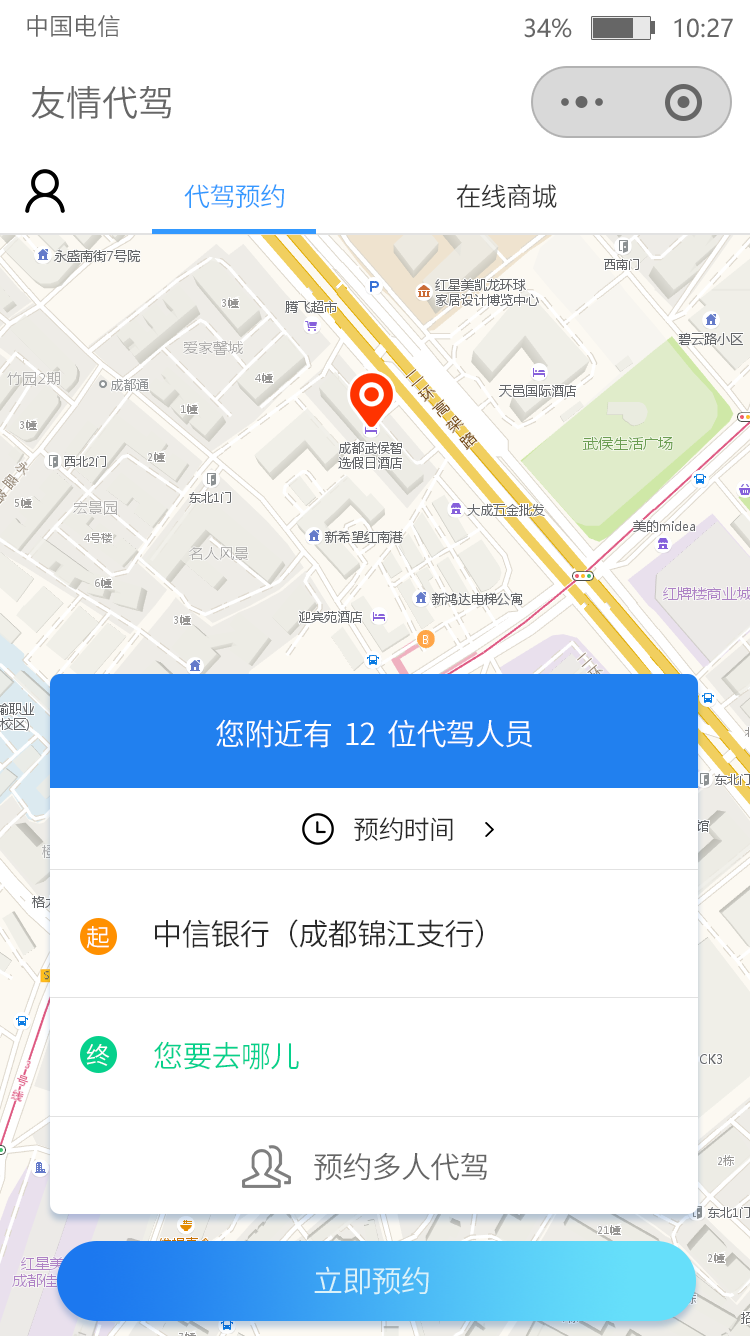
<style>
.page{position:relative;width:750px;height:1336px;background:#ffffff}
.page>*{position:absolute;margin:0}
.t1{font:24px "SourceHanSansCN-Normal";color:#666666}
.t2{font:24px "MicrosoftYaHei";color:#666666}
.t3{font:36px "SourceHanSansCN-Normal";color:#666666}
.t4{font:26px "SourceHanSansCN-Normal";letter-spacing:-0.025em;color:#3399ff}
.t5{font:26px "SourceHanSansCN-Normal";letter-spacing:-0.025em;color:#333333}
.t6{font:30px "SourceHanSansCN-Normal";letter-spacing:-0.025em;color:#ffffff}
.t7{font:26px "SourceHanSansCN-Normal";letter-spacing:-0.025em;color:#282828}
.t8{font:24px "SourceHanSansCN-Normal";letter-spacing:-0.025em;color:#ffffff}
.t9{font:30px "SourceHanSansCN-Normal";letter-spacing:-0.025em;color:#282828}
.t10{font:30px "SourceHanSansCN-Normal";letter-spacing:-0.025em;color:#06d18c}
.t11{font:30px "SourceHanSansCN-Normal";letter-spacing:-0.025em;color:#666666}
.t12{font:30px "SourceHanSansCN-Normal";letter-spacing:-0.025em;color:#daf2f9}
</style>
<div class="page">
<p class="t1" style="left:27px;top:15px;width:93px;height:22px">中国电信</p>
<p class="t2" style="left:524px;top:18px;width:209px;height:20px">34%              10:27</p>
<p class="t3" style="left:31px;top:86px;width:140px;height:33px">友情代驾</p>
<p class="t4" style="left:184px;top:184px;width:373px;height:24px">代驾预约<span class="t5">                                 在线商城</span></p>
<p class="t6" style="left:216px;top:719px;width:316px;height:29px">您附近有  12  位代驾人员</p>
<p class="t7" style="left:354px;top:817px;width:99px;height:24px">预约时间</p>
<p class="t8" style="left:86px;top:926px;width:23px;height:22px">起</p>
<p class="t9" style="left:155px;top:919px;width:328px;height:29px">中信银行（成都锦江支行）</p>
<p class="t8" style="left:86px;top:1044px;width:24px;height:22px">终</p>
<p class="t10" style="left:154px;top:1041px;width:145px;height:29px">您要去哪儿</p>
<p class="t11" style="left:314px;top:1152px;width:173px;height:29px">预约多人代驾</p>
<p class="t12" style="left:314px;top:1266px;width:115px;height:29px">立即预约</p>
</div>
